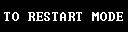
<style>
.page{position:relative;width:128px;height:32px;background:#000000}
.page>*{position:absolute;margin:0}
.t1{font:12.9px "Terminal";color:#ffffff}
</style>
<div class="page">
<p class="t1" style="left:4px;top:12px;width:119px;height:9px">TO RESTART MODE</p>
</div>
